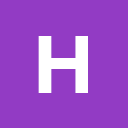
<style>
.page{position:relative;width:128px;height:128px;background:#923bc4}
.page>*{position:absolute;margin:0}
.t1{font:80px "Avenir-Black";color:#ffffff}
</style>
<div class="page">
<p class="t1" style="left:38px;top:36px;width:50px;height:57px">H</p>
</div>
